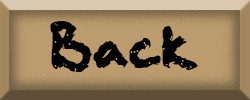
<style>
.page{position:relative;width:250px;height:100px;background:#bc9c6e}
.page>*{position:absolute;margin:0}
.t1{font:50px "squeakychalksound";color:#000000}
</style>
<div class="page">
<p class="t1" style="left:50px;top:21px;width:148px;height:51px">Back</p>
</div>
